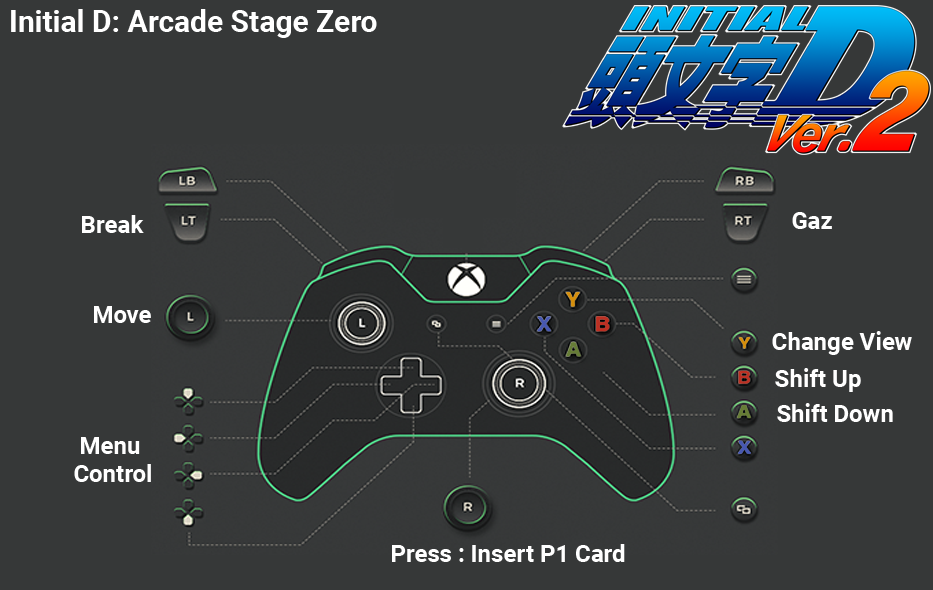
<style>
.page{position:relative;width:933px;height:590px;background:#363838}
.page>*{position:absolute;margin:0}
.t1{font:30px "Roboto-Bold";color:#ffffff}
.t2{font:24px "Roboto-Bold";color:#ffffff}
.t3{font:24px/28px "Roboto-Bold";color:#ffffff}
</style>
<div class="page">
<p class="t1" style="left:11px;top:9px;width:366px;height:29px">Initial D: Arcade Stage Zero</p>
<p class="t2" style="left:82px;top:215px;width:62px;height:18px">Break</p>
<p class="t2" style="left:792px;top:212px;width:40px;height:17px">Gaz</p>
<p class="t2" style="left:94px;top:306px;width:57px;height:17px">Move</p>
<p class="t2" style="left:772px;top:331px;width:140px;height:24px">Change View</p>
<p class="t2" style="left:775px;top:368px;width:86px;height:24px">Shift Up</p>
<p class="t2" style="left:777px;top:403px;width:116px;height:19px">Shift Down</p>
<p class="t3" style="left:74px;top:437px;width:77px;height:45px;text-align:center">Menu <br>Control</p>
<p class="t2" style="left:392px;top:544px;width:233px;height:18px">Press : Insert P1 Card</p>
</div>
